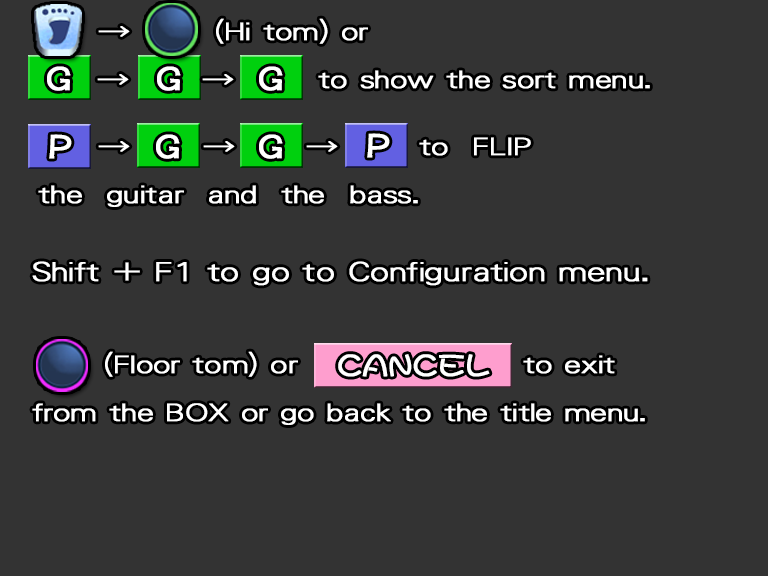
<style>
.page{position:relative;width:768px;height:576px;background:#333333}
.page>*{position:absolute;margin:0}
.t1{font:24.8px/48px "DFGothicP-W3-WING-RKSJ-H";color:#ffffff;font-weight:bold;scale:1.33 1}
.t2{font:30px "DFPOPClip-W7-WINP-RKSJ-H";color:#ffffff;font-weight:bold}
.t3{font:30px "DFPOPClip-W7-WING-RKSJ-H";color:#ffffff;font-weight:bold}
.t4{font:27px "DFGothicP-W3-WING-RKSJ-H";color:#ffffff;font-weight:bold;scale:1.33 1}
.t5{font:30px "DFMaruMojiSQ-W5-WINP-RKSJ-H";color:#ffffff;font-weight:bold}
</style>
<div class="page">
<p class="t1" style="left:97px;top:18px;width:553px;height:71px">→       (Hi tom) or <br> 　　 →      →       to show the sort menu.</p>
<p class="t2" style="left:47px;top:66px;width:24px;height:25px">G</p>
<p class="t2" style="left:157px;top:66px;width:24px;height:25px">G</p>
<p class="t2" style="left:259px;top:66px;width:24px;height:25px">G</p>
<p class="t1" style="left:38px;top:137px;width:493px;height:70px">→      →    →     to  FLIP<br>the  guitar  and  the  bass.</p>
<p class="t2" style="left:49px;top:134px;width:23px;height:25px">P</p>
<p class="t2" style="left:156px;top:134px;width:24px;height:25px">G</p>
<p class="t2" style="left:259px;top:134px;width:24px;height:25px">G</p>
<p class="t3" style="left:367px;top:133px;width:23px;height:25px">P</p>
<p class="t4" style="left:32px;top:261px;width:616px;height:25px">Shift + F1 to go to Configuration menu.</p>
<p class="t1" style="left:32px;top:351px;width:613px;height:74px">(Floor tom) or                   to exit<br>from the BOX or go back to the title menu.</p>
<p class="t5" style="left:338px;top:354px;width:152px;height:23px">CANCEL</p>
</div>
